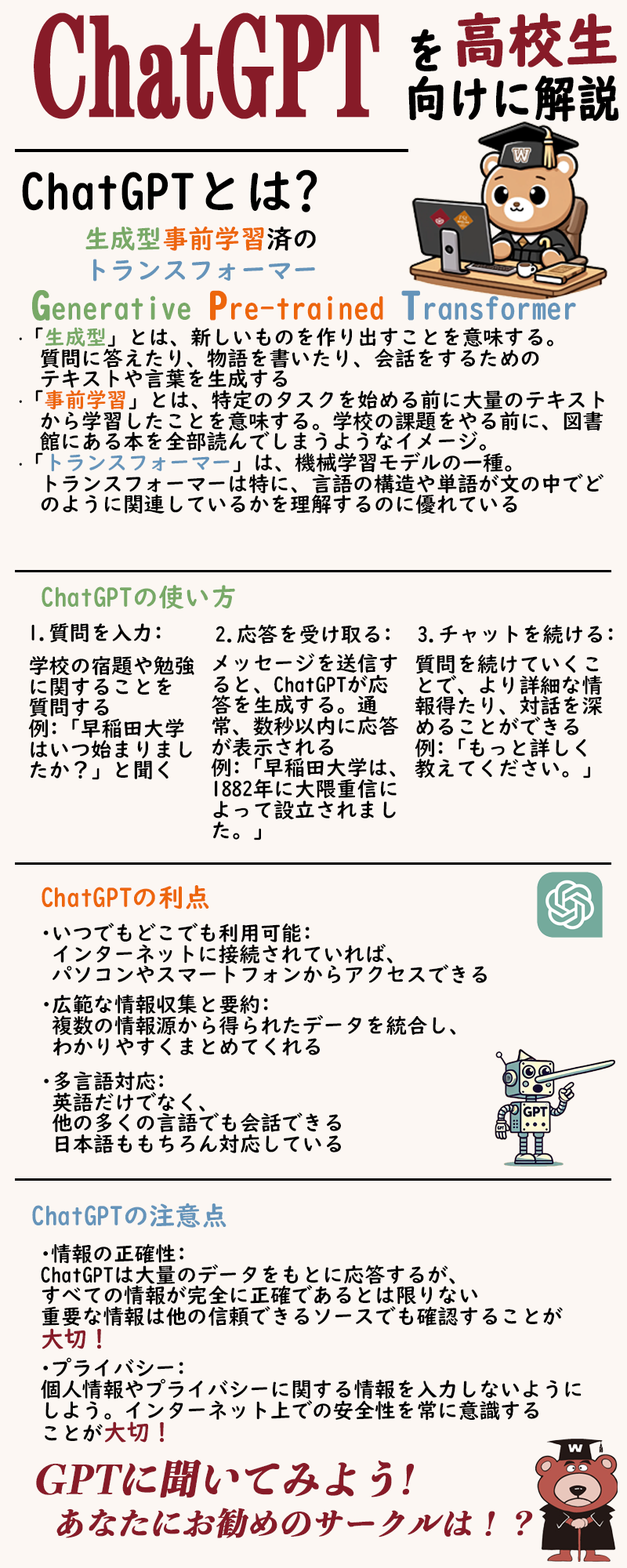
<style>
.page{position:relative;width:627px;height:1568px;background:#fcf7f3}
.page>*{position:absolute;margin:0}
.t1{font:146.3px "FZCHSJW--GB1-0";color:#871b28;font-weight:bold;scale:0.52 1}
.t2{font:58.7px "UDDigiKyokashoN-B";color:#871b28;font-weight:bold;scale:0.93 1}
.t3{font:49.6px/47px "UDDigiKyokashoN-B";color:#000000;font-weight:bold;scale:0.85 1}
.t4{font:50.1px "UDDigiKyokashoN-B";color:#000000}
.t5{font:26.1px/31.4px "UDDigiKyokashoN-B";color:#6594ba}
.t6{font:26.1px/31.4px "UDDigiKyokashoN-B";color:#78a967}
.t7{font:26.1px/31.4px "UDDigiKyokashoN-B";color:#ed660c}
.t8{font:26.1px/31.4px "UDDigiKyokashoN-B";color:#000000}
.t9{font:31.4px "UDDigiKyokashoN-B";color:#ed660c}
.t10{font:39.2px "UDDigiKyokashoN-B";color:#78a967;font-weight:bold}
.t11{font:31.4px "UDDigiKyokashoN-B";color:#78a967}
.t12{font:39.2px "UDDigiKyokashoN-B";color:#ed660c;font-weight:bold}
.t13{font:39.2px "UDDigiKyokashoN-B";color:#6594ba;font-weight:bold}
.t14{font:31.4px "UDDigiKyokashoN-B";color:#6594ba}
.t15{font:20.9px/20.9px "UDDigiKyokashoN-B";color:#000000}
.t16{font:20.9px/20.9px "KozGoPr6N-Regular";color:#000000}
.t17{font:20.9px/20.9px "UDDigiKyokashoN-B";color:#78a967}
.t18{font:20.9px/20.9px "UDDigiKyokashoN-B";color:#ed660c}
.t19{font:20.9px/20.9px "UDDigiKyokashoN-B";color:#6594ba}
.t20{font:26.1px "UDDigiKyokashoN-B";color:#78a967}
.t21{font:20.9px "UDDigiKyokashoN-B";color:#000000}
.t22{font:26.1px "UDDigiKyokashoN-B";color:#ed660c}
.t23{font:26.1px "UDDigiKyokashoN-B";color:#6594ba}
.t24{font:23.5px/20.9px "UDDigiKyokashoN-B";color:#871b28}
.t25{font:39.2px "ToppanBunkyuMidashiMinchoStdN-ExtraBold";color:#871b28;font-weight:bold;font-style:italic}
.t26{font:31.4px "ToppanBunkyuMidashiMinchoStdN-ExtraBold";color:#871b28;font-weight:bold;font-style:italic}
</style>
<div class="page">
<p class="t1" style="left:34px;top:13px;width:345px;height:106px">ChatGPT</p>
<p class="t2" style="left:457px;top:12px;width:160px;height:55px">高校生</p>
<p class="t3" style="left:408px;top:29px;width:211px;height:93px">を<br>向けに解説</p>
<p class="t4" style="left:22px;top:169px;width:296px;height:43px">ChatGPTとは?</p>
<p class="t5" style="left:85px;top:226px;width:231px;height:55px;text-align:center"><span class="t6">生成型</span><span class="t7">事前学習</span><span class="t8">済の<br></span>トランスフォーマー</p>
<p class="t9" style="left:32px;top:290px;width:544px;height:31px"><span class="t10">G</span><span class="t11">enerative </span><span class="t12">P</span>re-trained <span class="t13">T</span><span class="t14">ransformer</span></p>
<p class="t15" style="left:19px;top:327px;width:585px;height:187px"><span class="t16">·</span>「<span class="t17">生成型</span>」とは、新しいものを作り出すことを意味する。<br>　質問に答えたり、物語を書いたり、会話をするための<br>  テキストや言葉を生成する<br><span class="t16">·</span>「<span class="t18">事前学習</span>」とは、特定のタスクを始める前に大量のテキスト<br>　から学習したことを意味する。学校の課題をやる前に、図書<br>  館にある本を全部読んでしまうようなイメージ。<br><span class="t16">·</span>「<span class="t19">トランスフォーマー</span>」は、機械学習モデルの一種。<br>  トランスフォーマーは特に、言語の構造や単語が文の中でど<br>  のように関連しているかを理解するのに優れている</p>
<p class="t20" style="left:42px;top:585px;width:193px;height:24px">ChatGPTの使い方</p>
<p class="t21" style="left:31px;top:622px;width:130px;height:21px">1.質問を入力:</p>
<p class="t21" style="left:216px;top:624px;width:174px;height:20px">2.応答を受け取る:</p>
<p class="t21" style="left:418px;top:624px;width:195px;height:20px">3.チャットを続ける:</p>
<p class="t15" style="left:211px;top:653px;width:188px;height:187px">メッセージを送信す<br>ると、ChatGPTが応<br>答を生成する。通<br>常、数秒以内に応答<br>が表示される<br>例:「早稲田大学は、<br>1882年に大隈重信に<br>よって設立されまし<br>た。」</p>
<p class="t15" style="left:415px;top:654px;width:188px;height:125px">質問を続けていくこ<br>とで、より詳細な情<br>報得たり、対話を深<br>めることができる<br>例:「もっと詳しく<br>教えてください。」</p>
<p class="t15" style="left:28px;top:655px;width:166px;height:125px">学校の宿題や勉強<br>に関することを<br>質問する<br>例:「早稲田大学<br>はいつ始まりまし<br>たか？」と聞く</p>
<p class="t22" style="left:42px;top:885px;width:167px;height:24px">ChatGPTの利点</p>
<p class="t15" style="left:43px;top:923px;width:444px;height:61px">·いつでもどこでも利用可能:<br> インターネットに接続されていれば、<br> パソコンやスマートフォンからアクセスできる</p>
<p class="t15" style="left:44px;top:994px;width:412px;height:62px">·広範な情報収集と要約:<br> 複数の情報源から得られたデータを統合し、<br> わかりやすくまとめてくれる</p>
<p class="t15" style="left:44px;top:1071px;width:297px;height:83px">·多言語対応:<br> 英語だけでなく、<br> 他の多くの言語でも会話できる<br> 日本語ももちろん対応している</p>
<p class="t23" style="left:32px;top:1203px;width:195px;height:25px">ChatGPTの注意点</p>
<p class="t15" style="left:41px;top:1243px;width:522px;height:106px">·情報の正確性:<br>ChatGPTは大量のデータをもとに応答するが、<br>すべての情報が完全に正確であるとは限りない<br>重要な情報は他の信頼できるソースでも確認することが<br><span class="t24">大切！</span></p>
<p class="t15" style="left:41px;top:1357px;width:541px;height:86px">·プライバシー:<br>個人情報やプライバシーに関する情報を入力しないように<br>しよう。インターネット上での安全性を常に意識する<br>ことが<span class="t24">大切！</span></p>
<p class="t25" style="left:36px;top:1460px;width:378px;height:38px">GPTに聞いてみよう!</p>
<p class="t26" style="left:56px;top:1508px;width:477px;height:30px">あなたにお勧めのサークルは！？</p>
</div>
